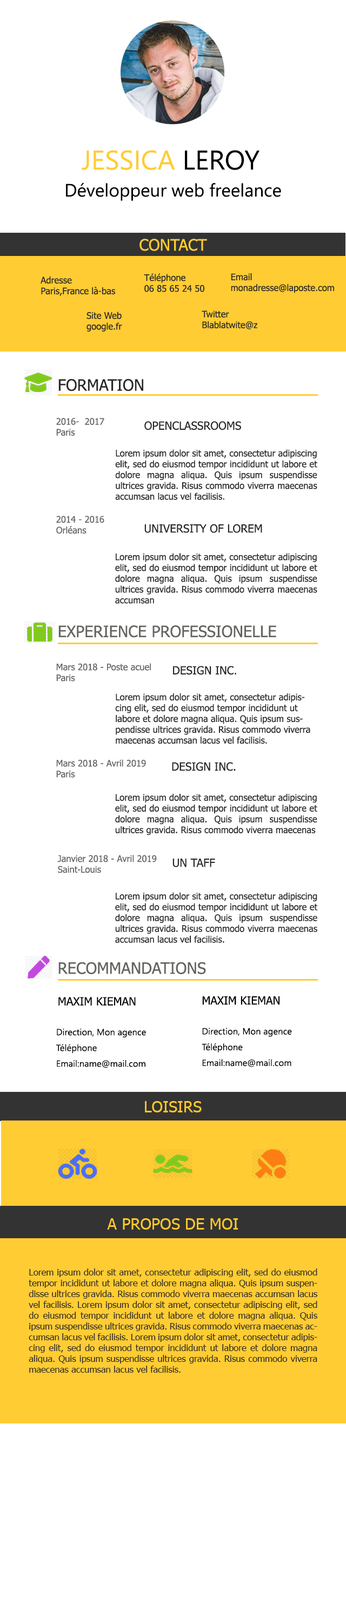
<style>
.page{position:relative;width:346px;height:1620px;background:#ffffff}
.page>*{position:absolute;margin:0}
.t1{font:27px "YuGothicUI-Regular";color:#ffcc33}
.t2{font:27px "YuGothicUI-Regular";color:#000000}
.t3{font:18px "YuGothicUI-Regular";color:#000000}
.t4{font:15.7px "Tahoma";color:#ffcc33}
.t5{font:9px "Tahoma";color:#282828}
.t6{font:15.8px "Tahoma";color:#282828}
.t7{font:9px "Tahoma";color:#646460}
.t8{font:11.3px "Tahoma";color:#282828}
.t9{font:15.8px "Tahoma";color:#646460}
.t10{font:11.3px "Tahoma";color:#000000}
.t11{font:9px/15.8px "YuGothicUI-Regular";color:#000000}
.t12{font:15.8px "Tahoma";color:#ffca28}
</style>
<div class="page">
<p class="t1" style="left:82px;top:150px;width:177px;height:20px">JESSICA<span class="t2"> LEROY</span></p>
<p class="t3" style="left:66px;top:183px;width:215px;height:18px">Développeur web freelance</p>
<p class="t4" style="left:139px;top:239px;width:68px;height:12px">CONTACT</p>
<p class="t5" style="left:41px;top:276px;width:75px;height:20px">Adresse<br>Paris,France là-bas</p>
<p class="t5" style="left:144px;top:273px;width:60px;height:19px">Téléphone<br>06 85 65 24 50</p>
<p class="t5" style="left:231px;top:273px;width:103px;height:20px">Email<br>monadresse@laposte.com</p>
<p class="t5" style="left:86px;top:312px;width:36px;height:20px">Site Web<br>google.fr</p>
<p class="t5" style="left:201px;top:311px;width:56px;height:18px">Twitter<br>Blablatwite@z</p>
<p class="t6" style="left:58px;top:379px;width:85px;height:13px">FORMATION</p>
<p class="t7" style="left:56px;top:418px;width:48px;height:18px">2016-  2017<br>Paris</p>
<p class="t8" style="left:144px;top:421px;width:97px;height:9px">OPENCLASSROOMS</p>
<p class="t5" style="left:115px;top:449px;width:202px;height:51px;text-align:justify">Lorem ipsum dolor sit amet, consectetur adipiscing elit, sed do eiusmod tempor incididunt ut labore et dolore magna aliqua. Quis ipsum suspendisse ultrices gravida. Risus commodo viverra maecenas accumsan lacus vel facilisis.</p>
<p class="t7" style="left:56px;top:516px;width:48px;height:18px">2014 - 2016<br>Orléans</p>
<p class="t8" style="left:144px;top:524px;width:118px;height:9px">UNIVERSITY OF LOREM</p>
<p class="t5" style="left:115px;top:553px;width:202px;height:51px;text-align:justify">Lorem ipsum dolor sit amet, consectetur adipiscing elit, sed do eiusmod tempor incididunt ut labore et dolore magna aliqua. Quis ipsum suspendisse ultrices gravida. Risus commodo viverra maecenas accumsan</p>
<p class="t9" style="left:58px;top:625px;width:218px;height:13px">EXPERIENCE PROFESSIONELLE</p>
<p class="t7" style="left:56px;top:663px;width:95px;height:18px">Mars 2018 - Poste acuel<br>Paris</p>
<p class="t8" style="left:173px;top:666px;width:63px;height:9px">DESIGN INC.</p>
<p class="t5" style="left:115px;top:693px;width:195px;height:51px">Lorem ipsum dolor sit amet, consectetur adipiscing elit, sed do eiusmod tempor incididunt ut labore et dolore magna aliqua. Quis ipsum suspendisse ultrices gravida. Risus commodo viverra maecenas accumsan lacus vel facilisis.</p>
<p class="t7" style="left:56px;top:759px;width:90px;height:19px">Mars 2018 - Avril 2019<br>Paris</p>
<p class="t8" style="left:172px;top:762px;width:63px;height:9px">DESIGN INC.</p>
<p class="t5" style="left:115px;top:794px;width:202px;height:41px;text-align:justify">Lorem ipsum dolor sit amet, consectetur adipiscing elit, sed do eiusmod tempor incididunt ut labore et dolore magna aliqua. Quis ipsum suspendisse ultrices gravida. Risus commodo viverra maecenas</p>
<p class="t7" style="left:57px;top:855px;width:100px;height:18px">Janvier 2018 - Avril 2019<br>Saint-Louis</p>
<p class="t8" style="left:172px;top:859px;width:43px;height:8px">UN TAFF</p>
<p class="t5" style="left:115px;top:892px;width:203px;height:51px;text-align:justify">Lorem ipsum dolor sit amet, consectetur adipiscing elit, sed do eiusmod tempor incididunt ut labore et dolore magna aliqua. Quis ipsum suspendisse ultrices gravida. Risus commodo viverra maecenas accumsan lacus vel facilisis.</p>
<p class="t9" style="left:58px;top:962px;width:148px;height:12px">RECOMMANDATIONS</p>
<p class="t10" style="left:58px;top:997px;width:78px;height:8px">MAXIM KIEMAN</p>
<p class="t10" style="left:202px;top:996px;width:77px;height:9px">MAXIM KIEMAN</p>
<p class="t11" style="left:56px;top:1028px;width:90px;height:40px">Direction, Mon agence<br>Téléphone<br>Email:name@mail.com</p>
<p class="t11" style="left:201px;top:1028px;width:91px;height:39px">Direction, Mon agence<br>Téléphone<br>Email:name@mail.com</p>
<p class="t12" style="left:145px;top:1101px;width:56px;height:11px">LOISIRS</p>
<p class="t12" style="left:107px;top:1218px;width:131px;height:12px">A PROPOS DE MOI</p>
<p class="t5" style="left:29px;top:1268px;width:289px;height:105px;text-align:justify">Lorem ipsum dolor sit amet, consectetur adipiscing elit, sed do eiusmod tempor incididunt ut labore et dolore magna aliqua. Quis ipsum suspendisse ultrices gravida. Risus commodo viverra maecenas accumsan lacus vel facilisis. Lorem ipsum dolor sit amet, consectetur adipiscing elit, sed do eiusmod tempor incididunt ut labore et dolore magna aliqua. Quis ipsum suspendisse ultrices gravida. Risus commodo viverra maecenas accumsan lacus vel facilisis. Lorem ipsum dolor sit amet, consectetur adipiscing elit, sed do eiusmod tempor incididunt ut labore et dolore magna aliqua. Quis ipsum suspendisse ultrices gravida. Risus commodo viverra maecenas accumsan lacus vel facilisis.</p>
</div>
